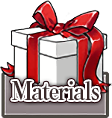
<style>
.page{position:relative;width:112px;height:118px;background:#ffffff}
.page>*{position:absolute;margin:0}
.t1{font:25px "RyuminPro-ExBold";letter-spacing:-0.08em;color:#392828;scale:0.9 1}
</style>
<div class="page">
<p class="t1" style="left:12px;top:81px;width:87px;height:20px">Materials</p>
</div>
